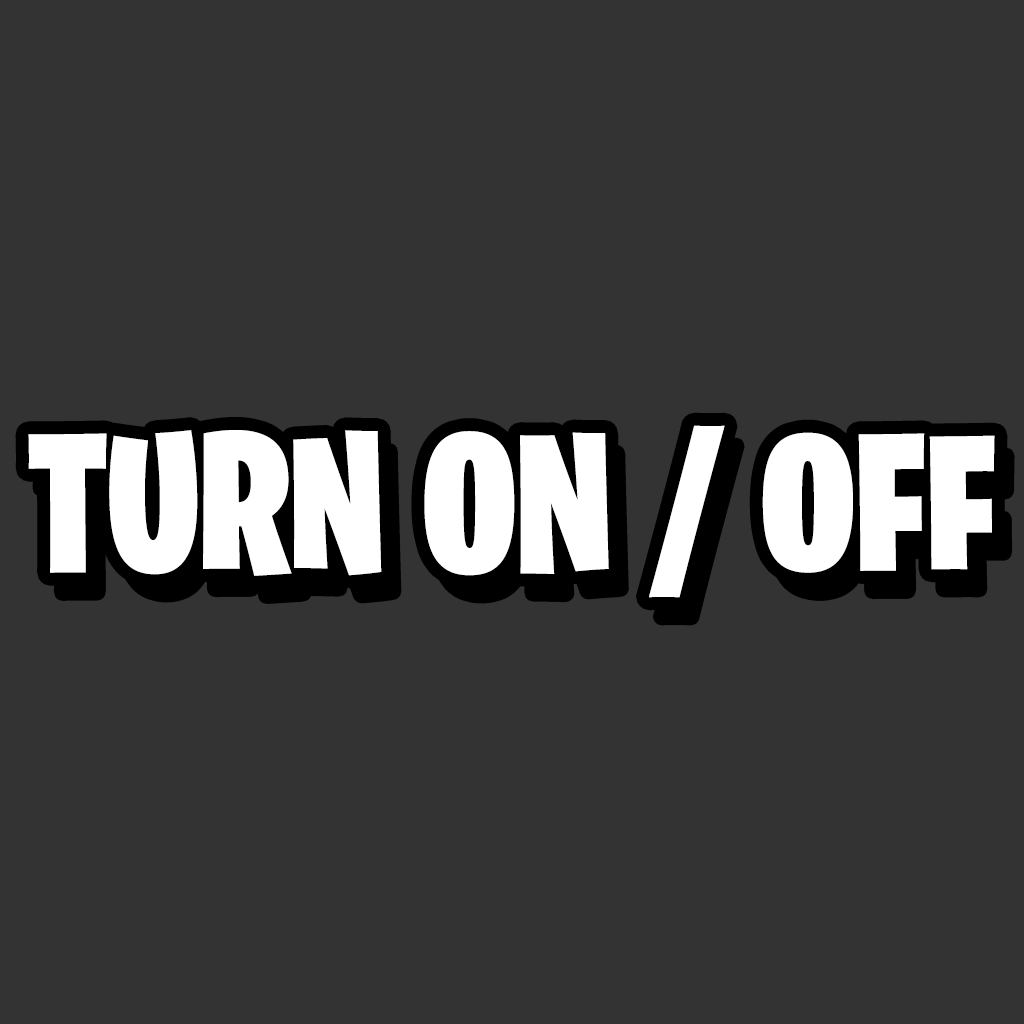
<style>
.page{position:relative;width:1024px;height:1024px;background:#333333}
.page>*{position:absolute;margin:0}
.t1{font:197.4px "BurbankBigCondensed-Black";color:#ffffff}
</style>
<div class="page">
<p class="t1" style="left:28px;top:425px;width:967px;height:173px">TURN ON / OFF</p>
</div>
